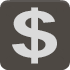
<style>
.page{position:relative;width:70px;height:70px;background:#4d4843}
.page>*{position:absolute;margin:0}
.t1{font:64px "Arial-BoldMT";color:#dadada;scale:1.48 1}
</style>
<div class="page">
<p class="t1" style="left:12px;top:7px;width:45px;height:57px">$</p>
</div>
